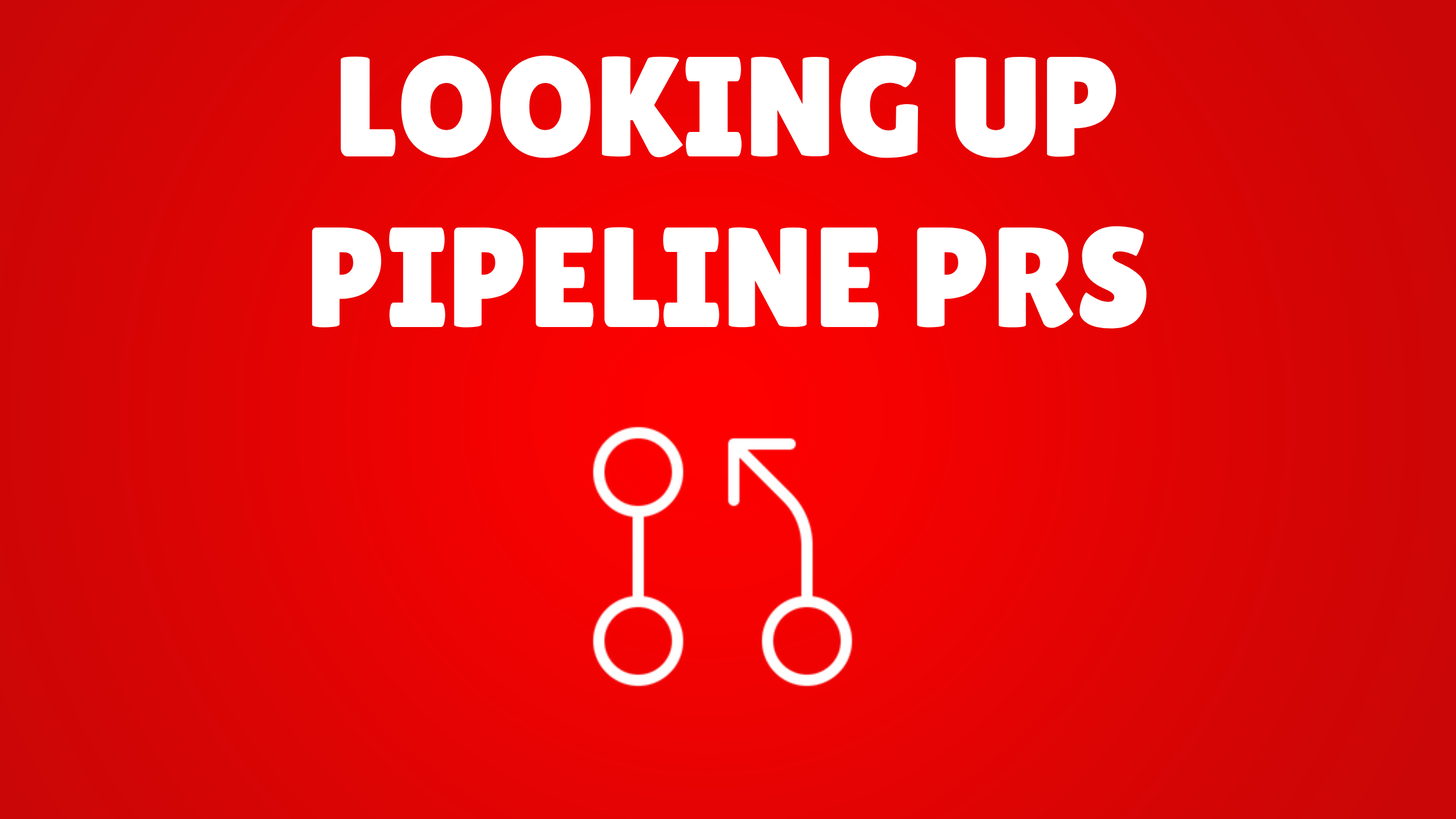
<style>
.page{position:relative;width:1456px;height:819px}
.page>*{position:absolute;margin:0}
.t1{font:142.2px "LilitaOne";color:#ffffff}
</style>
<div class="page">
<p class="t1" style="left:312px;top:55px;width:835px;height:274px;text-align:center">LOOKING UP <br>PIPELINE PRS</p>
</div>
